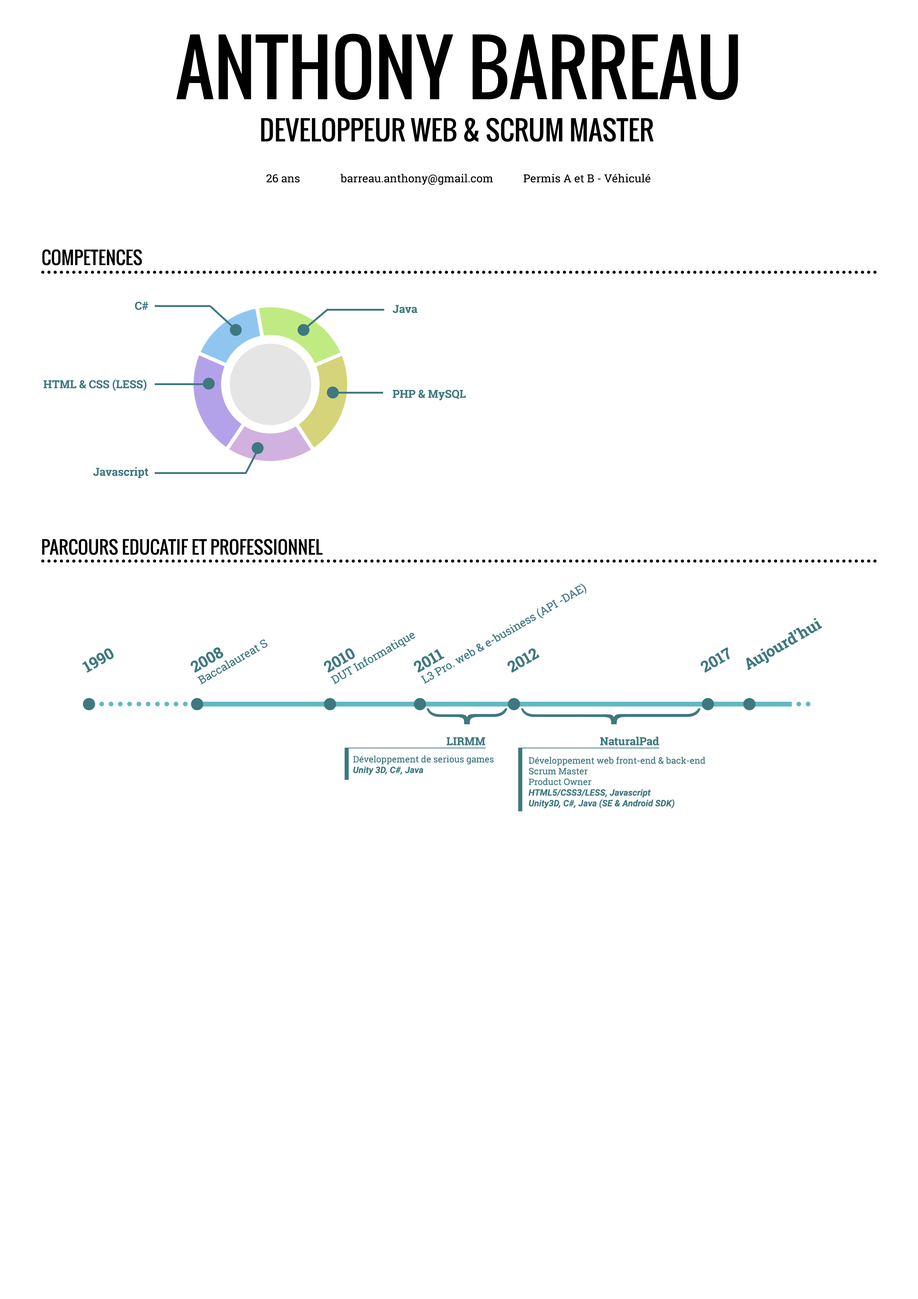
<style>
.page{position:relative;width:918px;height:1299px;background:#ffffff}
.page>*{position:absolute;margin:0}
.t1{font:74px "Oswald-Regular";color:#000000}
.t2{font:26.7px "Oswald-Regular";color:#000000}
.t3{font:11.1px "RobotoSlab-Regular";color:#000000}
.t4{font:17.8px "Oswald-Regular";color:#000000}
.t5{font:11.1px "RobotoSlab-Bold";color:#3e7880}
.t6{font:11.1px "RobotoSlab-Regular";color:#3e7880}
.t7{font:15.4px "RobotoSlab-Bold";color:#3e7880}
.t8{font:8.9px "RobotoSlab-Regular";color:#3e7880}
.t9{font:8.9px "Roboto-BoldItalic";color:#3e7880}
</style>
<div class="page">
<p class="t1" style="left:176px;top:34px;width:562px;height:66px">ANTHONY BARREAU</p>
<p class="t2" style="left:261px;top:118px;width:393px;height:24px">DEVELOPPEUR WEB &amp; SCRUM MASTER</p>
<p class="t3" style="left:341px;top:174px;width:152px;height:11px">barreau.anthony@gmail.com</p>
<p class="t3" style="left:523px;top:174px;width:127px;height:9px">Permis A et B - Véhiculé</p>
<p class="t3" style="left:266px;top:174px;width:34px;height:9px">26 ans</p>
<p class="t4" style="left:42px;top:249px;width:100px;height:16px">COMPETENCES</p>
<p class="t5" style="left:135px;top:301px;width:13px;height:9px">C#</p>
<p class="t5" style="left:393px;top:305px;width:25px;height:8px">Java</p>
<p class="t5" style="left:43px;top:379px;width:104px;height:12px">HTML &amp; CSS (LESS)</p>
<p class="t5" style="left:393px;top:389px;width:73px;height:11px">PHP &amp; MySQL</p>
<p class="t5" style="left:93px;top:467px;width:55px;height:11px">Javascript</p>
<p class="t4" style="left:42px;top:539px;width:281px;height:16px">PARCOURS EDUCATIF ET PROFESSIONNEL</p>
<p class="t6" style="left:421px;top:583px;width:165px;height:101px;rotate:-30deg">L3 Pro. web &amp; e-business (API -DAE)</p>
<p class="t7" style="left:746px;top:618px;width:77px;height:52px;rotate:-30deg">Aujourd’hui</p>
<p class="t6" style="left:197px;top:639px;width:71px;height:46px;rotate:-30deg">Baccalaureat S</p>
<p class="t6" style="left:331px;top:633px;width:84px;height:51px;rotate:-30deg">DUT Informatique</p>
<p class="t7" style="left:82px;top:648px;width:32px;height:25px;rotate:-30deg">1990</p>
<p class="t7" style="left:191px;top:647px;width:32px;height:26px;rotate:-30deg">2008</p>
<p class="t7" style="left:324px;top:648px;width:31px;height:25px;rotate:-30deg">2010</p>
<p class="t7" style="left:414px;top:649px;width:31px;height:24px;rotate:-30deg">2011</p>
<p class="t7" style="left:508px;top:648px;width:32px;height:25px;rotate:-30deg">2012</p>
<p class="t7" style="left:701px;top:647px;width:29px;height:26px;rotate:-30deg">2017</p>
<p class="t5" style="left:446px;top:737px;width:39px;height:8px">LIRMM</p>
<p class="t5" style="left:600px;top:736px;width:59px;height:9px">NaturalPad</p>
<p class="t8" style="left:353px;top:755px;width:141px;height:20px">Développement de serious games <br><span class="t9">Unity 3D, C#, Java</span></p>
<p class="t8" style="left:529px;top:756px;width:177px;height:52px">Développement web front-end &amp; back-end<br>Scrum Master<br>Product Owner<br><span class="t9">HTML5/CSS3/LESS, Javascript<br>Unity3D, C#, Java (SE &amp; Android SDK)</span></p>
</div>
